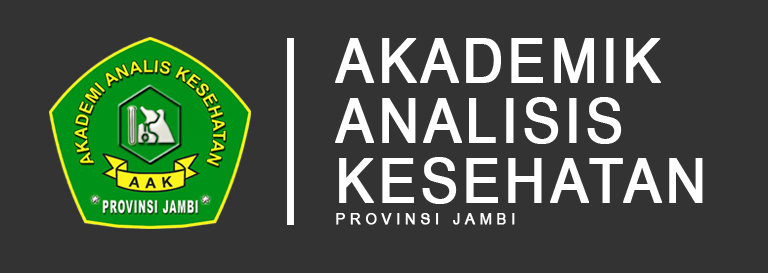
<style>
.page{position:relative;width:768px;height:273px;background:#333333}
.page>*{position:absolute;margin:0}
.t1{font:61px/60px "ArialNarrow";letter-spacing:0.05em;color:#ffffff;font-weight:bold;scale:1.11 1}
.t2{font:15.9px "ArialNarrow";letter-spacing:0.25em;color:#ffffff;font-weight:bold;scale:1.11 1}
</style>
<div class="page">
<p class="t1" style="left:335px;top:38px;width:368px;height:166px">AKADEMIK<br>ANALISIS<br>KESEHATAN</p>
<p class="t2" style="left:336px;top:213px;width:179px;height:12px">PROVINSI JAMBI</p>
</div>
